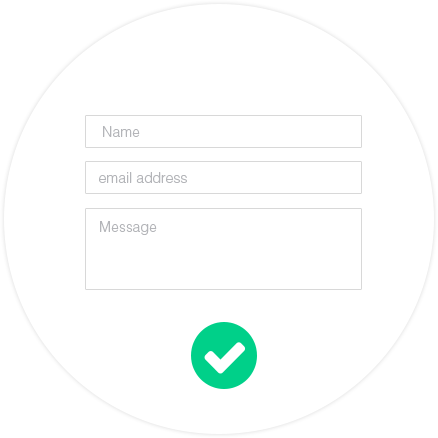
<style>
.page{position:relative;width:438px;height:438px;background:#ffffff}
.page>*{position:absolute;margin:0}
.t1{font:14px "HelveticaLTStd-Light";color:#b4b5b9}
</style>
<div class="page">
<p class="t1" style="left:103px;top:126px;width:37px;height:11px">Name</p>
<p class="t1" style="left:99px;top:172px;width:88px;height:11px">email address</p>
<p class="t1" style="left:100px;top:221px;width:57px;height:14px">Message</p>
</div>
